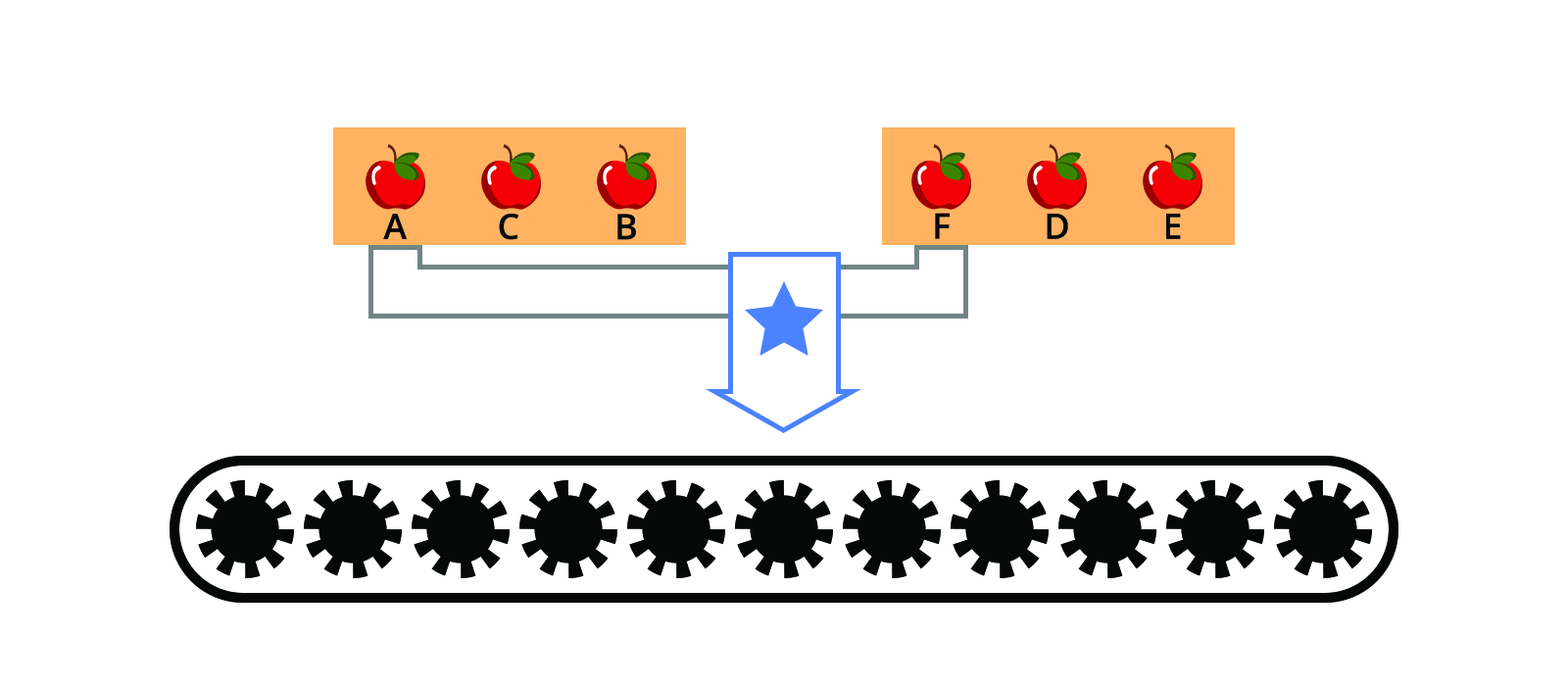
<style>
.page{position:relative;width:1568px;height:686px;background:#ffffff}
.page>*{position:absolute;margin:0}
.t1{font:35.3px "OpenSans-SemiBold";letter-spacing:0.12em;color:#060808}
</style>
<div class="page">
<p class="t1" style="left:383px;top:214px;width:24px;height:25px">A</p>
<p class="t1" style="left:499px;top:214px;width:19px;height:26px">C</p>
<p class="t1" style="left:617px;top:214px;width:19px;height:26px">B</p>
<p class="t1" style="left:935px;top:213px;width:15px;height:26px">F</p>
<p class="t1" style="left:1047px;top:214px;width:21px;height:25px">D</p>
<p class="t1" style="left:1166px;top:214px;width:15px;height:25px">E</p>
</div>
